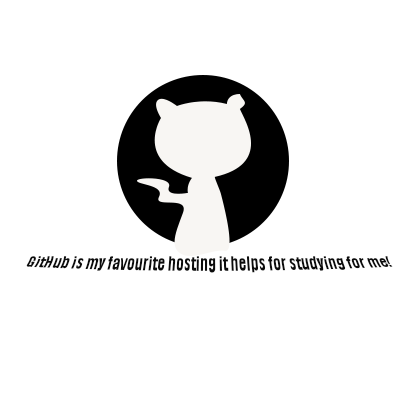
<style>
.page{position:relative;width:400px;height:400px;background:#ffffff}
.page>*{position:absolute;margin:0}
.t1{font:15.2px "Impact";color:#0b0b0b}
</style>
<div class="page">
<p class="t1" style="left:26px;top:256px;width:367px;height:17px">GitHub is my favourite hosting it helps for studying for me!</p>
</div>
